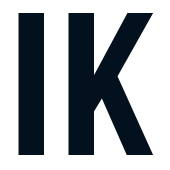
<style>
.page{position:relative;width:170px;height:170px;background:#ffffff}
.page>*{position:absolute;margin:0}
.t1{font:202.4px "BebasNeue";letter-spacing:0.025em;color:#03111e;scale:1.15 1}
</style>
<div class="page">
<p class="t1" style="left:18px;top:13px;width:136px;height:142px">IK</p>
</div>
